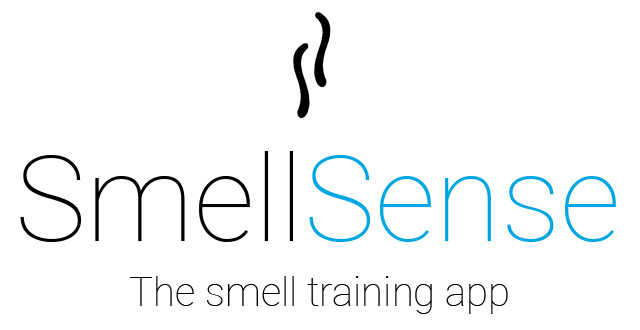
<style>
.page{position:relative;width:640px;height:330px;background:#ffffff}
.page>*{position:absolute;margin:0}
.t1{font:120px "Roboto-Thin";color:#000000}
.t2{font:120px "Roboto-Thin";color:#00a6e4}
.t3{font:40px "Roboto-Thin";color:#000000}
</style>
<div class="page">
<p class="t1" style="left:20px;top:151px;width:596px;height:91px">Smell<span class="t2">Sense</span></p>
<p class="t3" style="left:130px;top:276px;width:378px;height:38px">The smell training app</p>
</div>
